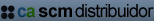
<style>
.page{position:relative;width:154px;height:21px}
.page>*{position:absolute;margin:0}
.t1{font:18px "ArialMT";letter-spacing:-0.05em;color:#000000}
.t2{font:18px "Arial-BoldMT";letter-spacing:-0.025em;color:#000000}
.t3{font:18px "Arial-BoldMT";letter-spacing:-0.05em;color:#0e4267}
.t4{font:18px "Arial-BoldMT";letter-spacing:-0.05em;color:#205b10}
</style>
<div class="page">
<p class="t1" style="left:75px;top:4px;width:79px;height:14px">distribuidor</p>
<p class="t2" style="left:17px;top:7px;width:55px;height:11px"><span class="t3">c</span><span class="t4">a </span>scm</p>
</div>
